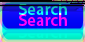
<style>
.page{position:relative;width:85px;height:42px}
.page>*{position:absolute;margin:0}
.t1{font:17.3px "MyriadPro-Semibold";color:#ff06f9}
</style>
<div class="page">
<p class="t1" style="left:19px;top:13px;width:48px;height:13px">Search</p>
</div>
